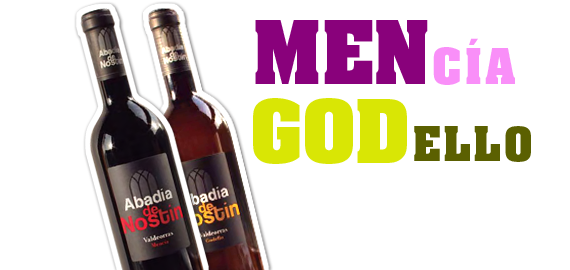
<style>
.page{position:relative;width:570px;height:270px;background:#ffffff}
.page>*{position:absolute;margin:0}
.t1{font:74.5px "AachenStd-Bold";letter-spacing:-0.005em;color:#89017b}
.t2{font:41.7px "AachenStd-Bold";letter-spacing:0.075em;color:#f98ff8}
.t3{font:74.5px "AachenStd-Bold";letter-spacing:-0.005em;color:#d9e605}
.t4{font:39.7px "AachenStd-Bold";letter-spacing:0.075em;color:#5b6001}
</style>
<div class="page">
<p class="t1" style="left:255px;top:20px;width:173px;height:64px">MEN</p>
<p class="t2" style="left:433px;top:38px;width:82px;height:47px">CÍA</p>
<p class="t3" style="left:253px;top:98px;width:154px;height:66px">GOD</p>
<p class="t4" style="left:414px;top:126px;width:117px;height:36px">ELLO</p>
</div>
